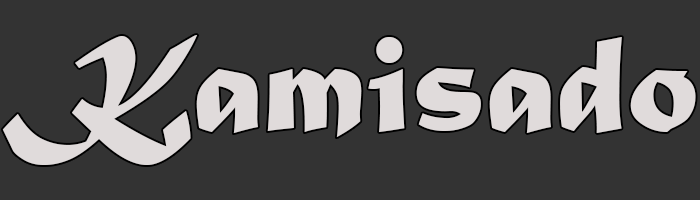
<style>
.page{position:relative;width:700px;height:200px;background:#333333}
.page>*{position:absolute;margin:0}
.t1{font:144px "MaturaMTScriptCapitals";color:#e0dbdb}
</style>
<div class="page">
<p class="t1" style="left:2px;top:35px;width:694px;height:130px">Kamisado</p>
</div>
